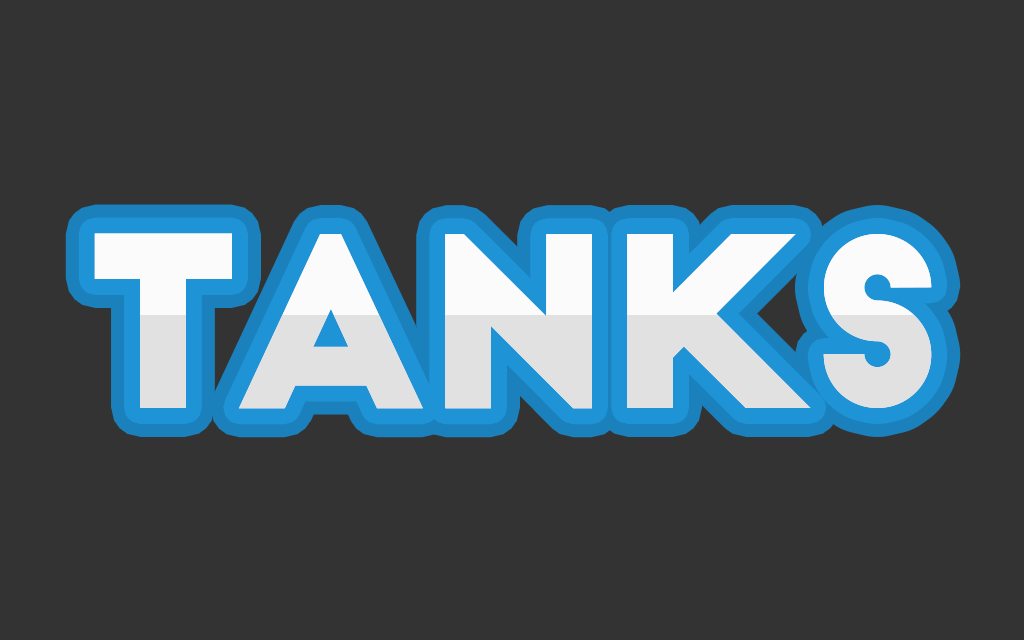
<style>
.page{position:relative;width:1024px;height:640px;background:#333333}
.page>*{position:absolute;margin:0}
.t1{font:232px "BigJohn"}
</style>
<div class="page">
<p class="t1" style="left:94px;top:233px;width:838px;height:176px">TANKs</p>
<p class="t1" style="left:94px;top:233px;width:838px;height:176px">TANKs</p>
</div>
